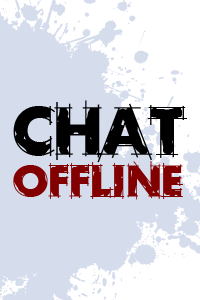
<style>
.page{position:relative;width:200px;height:300px;background:#d5dcec}
.page>*{position:absolute;margin:0}
.t1{font:43px/42px "RoughDraft";color:#820000}
.t2{font:66px/42px "RoughDraft";color:#000000}
</style>
<div class="page">
<p class="t1" style="left:13px;top:100px;width:174px;height:100px;text-align:center"><span class="t2">CHAT<br></span>offline</p>
</div>
